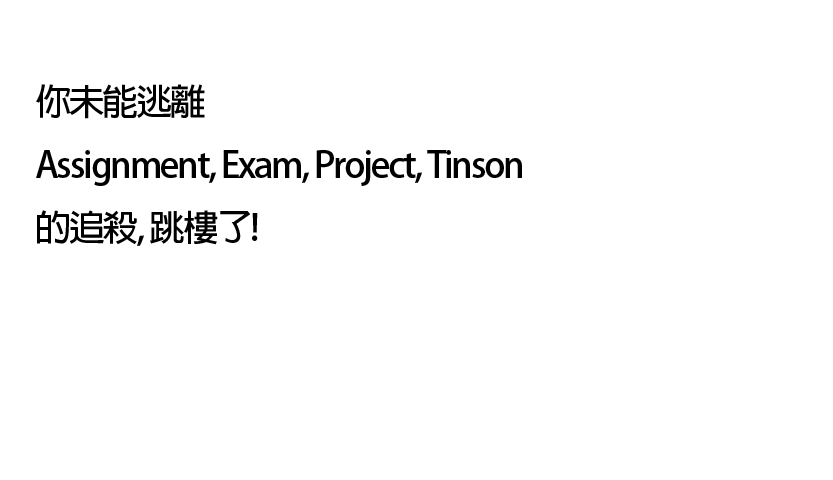
<style>
.page{position:relative;width:833px;height:480px;background:#ffffff}
.page>*{position:absolute;margin:0}
.t1{font:36px "AdobeFanHeitiStd-Bold";letter-spacing:-0.06em;color:#000000}
</style>
<div class="page">
<p class="t1" style="left:36px;top:84px;width:486px;height:162px">你未能逃離<br>Assignment, Exam, Project, Tinson<br>的追殺, 跳樓了!</p>
</div>
